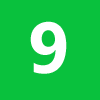
<style>
.page{position:relative;width:100px;height:100px;background:#09c13d}
.page>*{position:absolute;margin:0}
.t1{font:72px "SegoeUI-Bold";color:#ffffff}
</style>
<div class="page">
<p class="t1" style="left:30px;top:21px;width:37px;height:53px">9</p>
</div>
